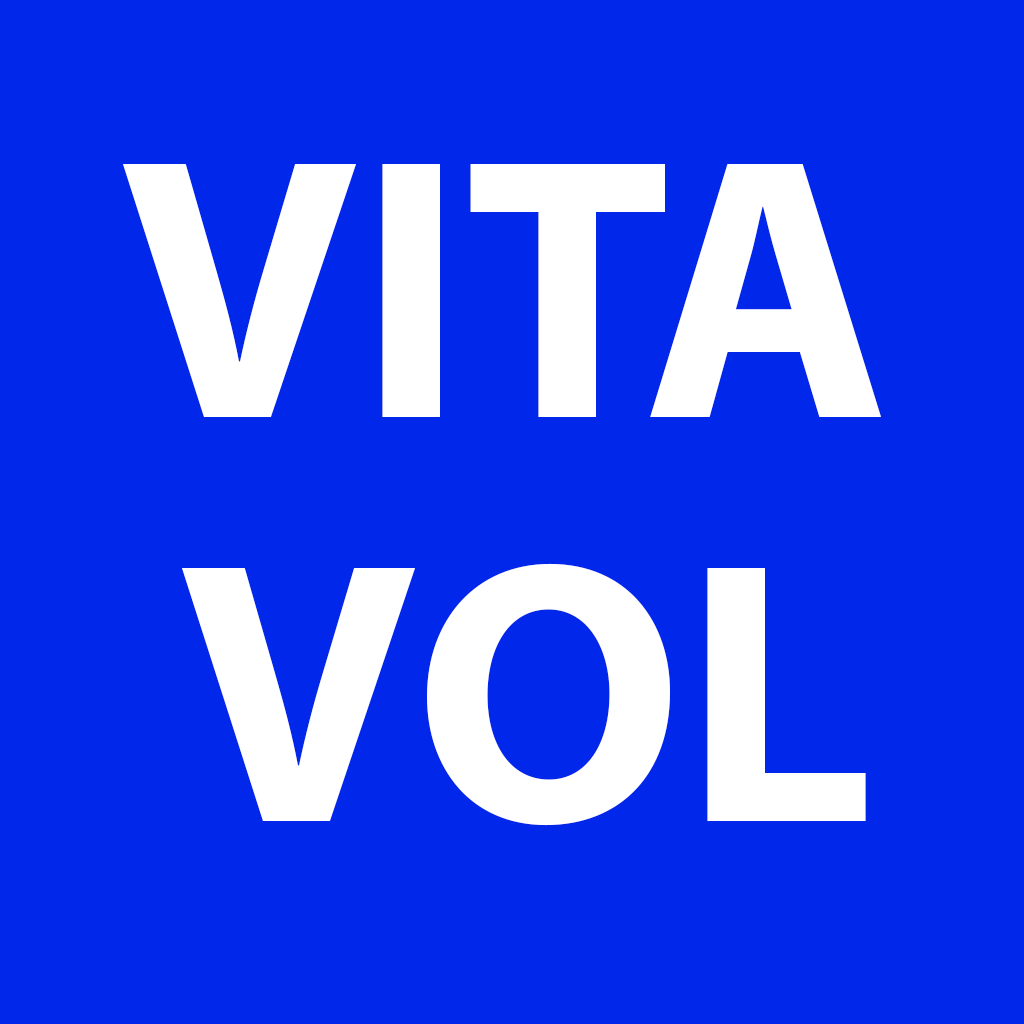
<style>
.page{position:relative;width:1024px;height:1024px;background:#0027ea}
.page>*{position:absolute;margin:0}
.t1{font:375px "MyriadPro-Bold";color:#ffffff}
</style>
<div class="page">
<p class="t1" style="left:123px;top:164px;width:758px;height:253px">VITA</p>
<p class="t1" style="left:182px;top:563px;width:684px;height:263px">VOL</p>
</div>
